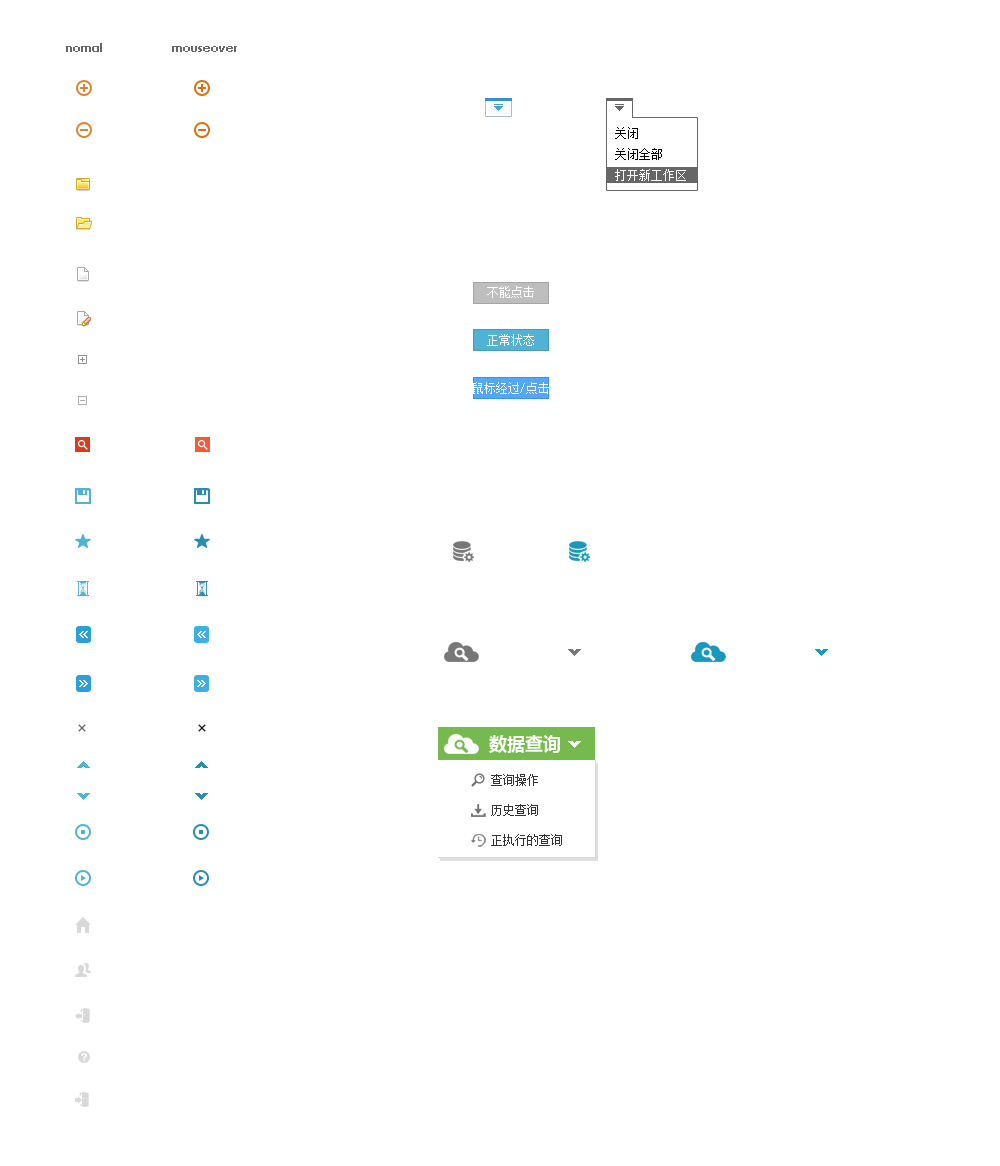
<style>
.page{position:relative;width:1000px;height:1166px;background:#ffffff}
.page>*{position:absolute;margin:0}
.t1{font:12px "CenturyGothic-Bold";color:#666666}
.t2{font:12px "SimSun";color:#000000}
.t3{font:12px "SimSun";color:#ffffff}
.t4{font:18px "MicrosoftYaHei-Bold";color:#ffffff}
.t5{font:12px/30px "SimSun";color:#333333}
</style>
<div class="page">
<p class="t1" style="left:66px;top:43px;width:36px;height:9px">nomal</p>
<p class="t1" style="left:172px;top:46px;width:65px;height:6px">mouseover</p>
<p class="t2" style="left:615px;top:127px;width:71px;height:54px;text-align:justify">关闭<br>关闭全部<br><span class="t3">打开新工作区</span></p>
<p class="t4" style="left:489px;top:735px;width:71px;height:18px">数据查询</p>
<p class="t5" style="left:491px;top:774px;width:71px;height:72px;text-align:justify">查询操作<br>历史查询<br>正执行的查询</p>
</div>
